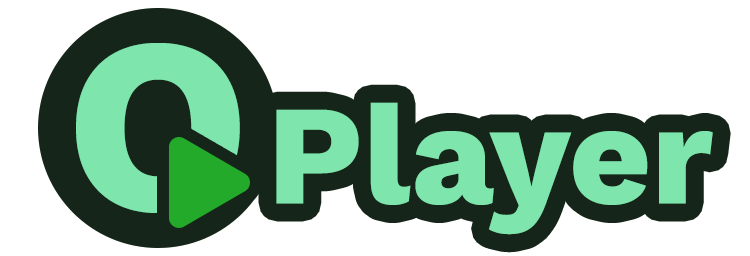
<style>
.page{position:relative;width:750px;height:256px;background:#ffffff}
.page>*{position:absolute;margin:0}
.t1{font:250px "WorkSansRoman_750.000wght_0ital";letter-spacing:0.04em;color:#7ee6ad;text-transform:uppercase;font-weight:bold}
.t2{font:142px "WorkSansRoman_750.000wght_0ital";color:#7ee6ad;font-weight:bold}
</style>
<div class="page">
<p class="t1" style="left:76px;top:43px;width:164px;height:170px">O</p>
<p class="t2" style="left:276px;top:102px;width:437px;height:133px">Player</p>
</div>
